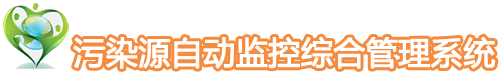
<style>
.page{position:relative;width:500px;height:75px;background:#ffffff}
.page>*{position:absolute;margin:0}
.t1{font:31.6px "MicrosoftYaHei";color:#ffffff;font-weight:bold}
</style>
<div class="page">
<p class="t1" style="left:73px;top:36px;width:423px;height:33px">污染源自动监控综合管理系统</p>
</div>
